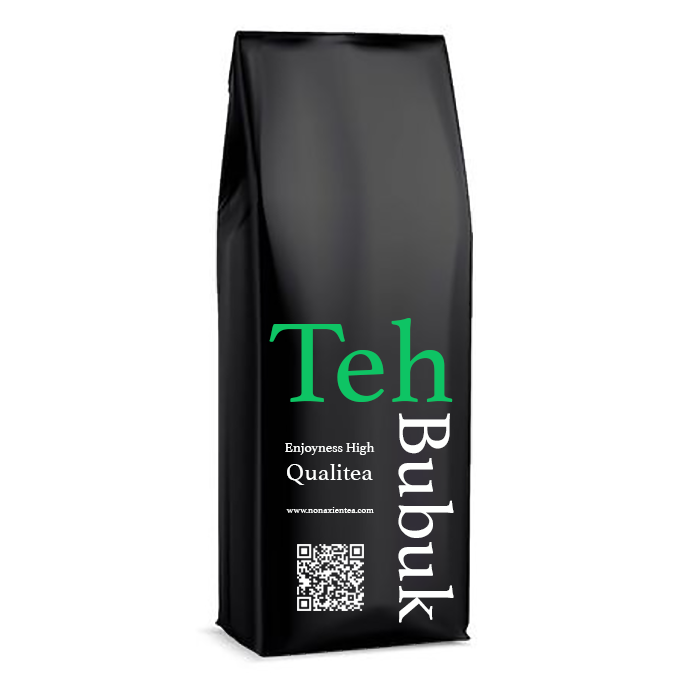
<style>
.page{position:relative;width:688px;height:688px;background:#ffffff}
.page>*{position:absolute;margin:0}
.t1{font:117.9px "Athelas-Regular";color:#0ec464}
.t2{font:76.9px "Athelas-Regular";color:#fefffe}
.t3{font:13.8px "Athelas-Regular";color:#fefffe}
.t4{font:24.3px "Athelas-Regular";color:#fefffe}
.t5{font:9.3px "Athelas-Regular";color:#fefffe}
</style>
<div class="page">
<p class="t1" style="left:269px;top:318px;width:184px;height:84px">Teh</p>
<p class="t2" style="left:398px;top:413px;width:56px;height:210px;rotate:90deg">Bubuk</p>
<p class="t3" style="left:285px;top:442px;width:90px;height:13px">Enjoyness High</p>
<p class="t4" style="left:287px;top:464px;width:86px;height:21px">Qualitea</p>
<p class="t5" style="left:286px;top:507px;width:88px;height:6px">www.nonaxientea.com</p>
</div>
